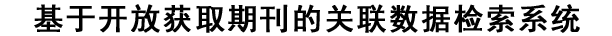
<style>
.page{position:relative;width:612px;height:36px;background:#ffffff}
.page>*{position:absolute;margin:0}
.t1{font:30px "SimHei";letter-spacing:0.05em;color:#000000;font-weight:bold}
</style>
<div class="page">
<p class="t1" style="left:34px;top:4px;width:546px;height:29px">基于开放获取期刊的关联数据检索系统</p>
</div>
